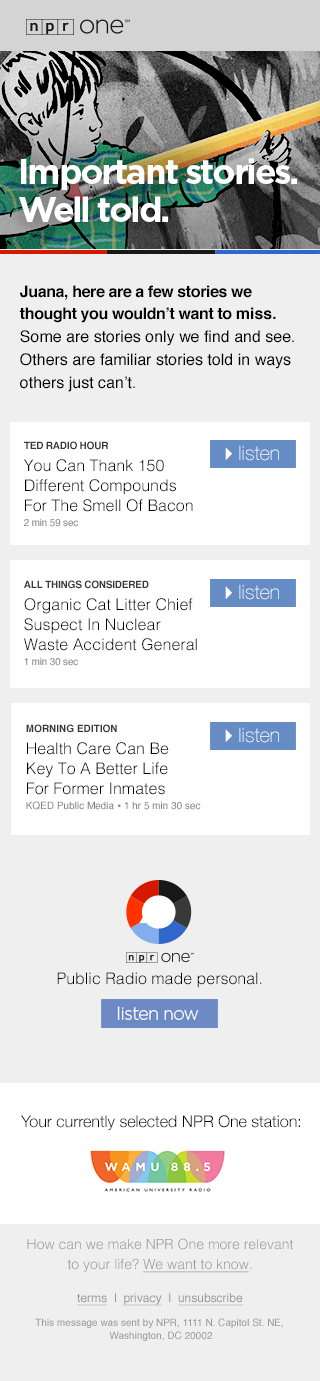
<style>
.page{position:relative;width:320px;height:1381px;background:#f0efef}
.page>*{position:absolute;margin:0}
.t1{font:35px/51.3px "Gotham-Bold";letter-spacing:-0.06em;color:#ffffff}
.t2{font:35px/38.1px "Gotham-Bold";letter-spacing:-0.06em;color:#ffffff}
.t3{font:16px/23px "Helvetica";color:#000000}
.t4{font:16px/23px "Helvetica-Bold";color:#000000}
.t5{font:16px/17px "Helvetica-Bold";letter-spacing:-0.025em;color:#000000}
.t6{font:16px/22px "Helvetica-Bold";letter-spacing:-0.025em;color:#000000}
.t7{font:16px/22px "Helvetica-Bold";color:#000000}
.t8{font:16px/20px "Helvetica-Light";color:#000000}
.t9{font:10px/18px "Helvetica-Bold";letter-spacing:-0.02em;color:#3a3939;text-transform:uppercase}
.t10{font:16px/22px "Helvetica-Light";color:#000000}
.t11{font:10px/15px "Helvetica";letter-spacing:-0.02em;color:#7f7f7f}
.t12{font:10px/18px "Helvetica-Bold";color:#3a3939;text-transform:uppercase}
.t13{font:10px/15px "Helvetica";color:#7f7f7f}
.t14{font:12px/15px "Helvetica-Bold";color:#7f7f7f}
.t15{font:16px "Helvetica-Light";color:#000000}
.t16{font:16px "HelveticaNeue-Light";color:#000000}
.t17{font:14px/20px "Helvetica-Light";color:#999999}
.t18{font:14px/20px "Helvetica-Light";color:#999999;text-decoration:underline}
.t19{font:12px "Helvetica";color:#999999;text-decoration:underline}
.t20{font:12px "Helvetica";color:#999999}
.t21{font:10px "Helvetica";color:#999999}
.t22{font:10px/13px "Helvetica";color:#999999}
</style>
<div class="page">
<p class="t1" style="left:19px;top:158px;width:278px;height:64px">Important stories. <br><span class="t2">Well told.</span></p>
<p class="t3" style="left:19px;top:285px;width:275px;height:107px"><span class="t4"><br></span><span class="t5">Juana, here are a few stories we <br></span><span class="t6">thought you wouldn’t want to </span><span class="t7">miss. <br></span>Some are stories only we find and see. <br>Others are familiar stories told in ways <br>others just can’t.</p>
<p class="t8" style="left:24px;top:441px;width:169px;height:86px"><span class="t9">TED Radio Hour<br></span><span class="t10">You Can Thank 150 <br></span>Different Compounds <br>For The Smell Of Bacon<br><span class="t11">2 min 59 sec</span></p>
<p class="t8" style="left:24px;top:580px;width:173px;height:86px"><span class="t9">All things considered<br></span><span class="t10">Organic Cat Litter Chief <br></span>Suspect In Nuclear <br>Waste Accident General<br><span class="t11">1 min 30 sec</span></p>
<p class="t8" style="left:26px;top:724px;width:175px;height:86px"><span class="t12">Morning Edition<br></span><span class="t10">Health Care Can Be<br></span>Key To A Better Life<br>For Former Inmates<br><span class="t13">KQED Public Media </span><span class="t14">•</span><span class="t13"> 1 hr 5 min 30 sec</span></p>
<p class="t15" style="left:57px;top:972px;width:205px;height:16px"><span class="t16"><br></span>Public Radio made personal.</p>
<p class="t16" style="left:21px;top:1115px;width:279px;height:15px">Your currently selected NPR One station:</p>
<p class="t17" style="left:27px;top:1238px;width:266px;height:35px;text-align:center">How can we make NPR One more relevant <br>to your life? <span class="t18">We want to know</span>.</p>
<p class="t19" style="left:76px;top:1293px;width:167px;height:13px">terms  <span class="t20">|  </span>privacy  <span class="t20">|  </span>unsubscribe</p>
<p class="t21" style="left:35px;top:1318px;width:248px;height:23px;text-align:center">This message was sent by NPR, 1111 N. Capitol St. NE, <br><span class="t22">Washington, DC 20002</span></p>
</div>
